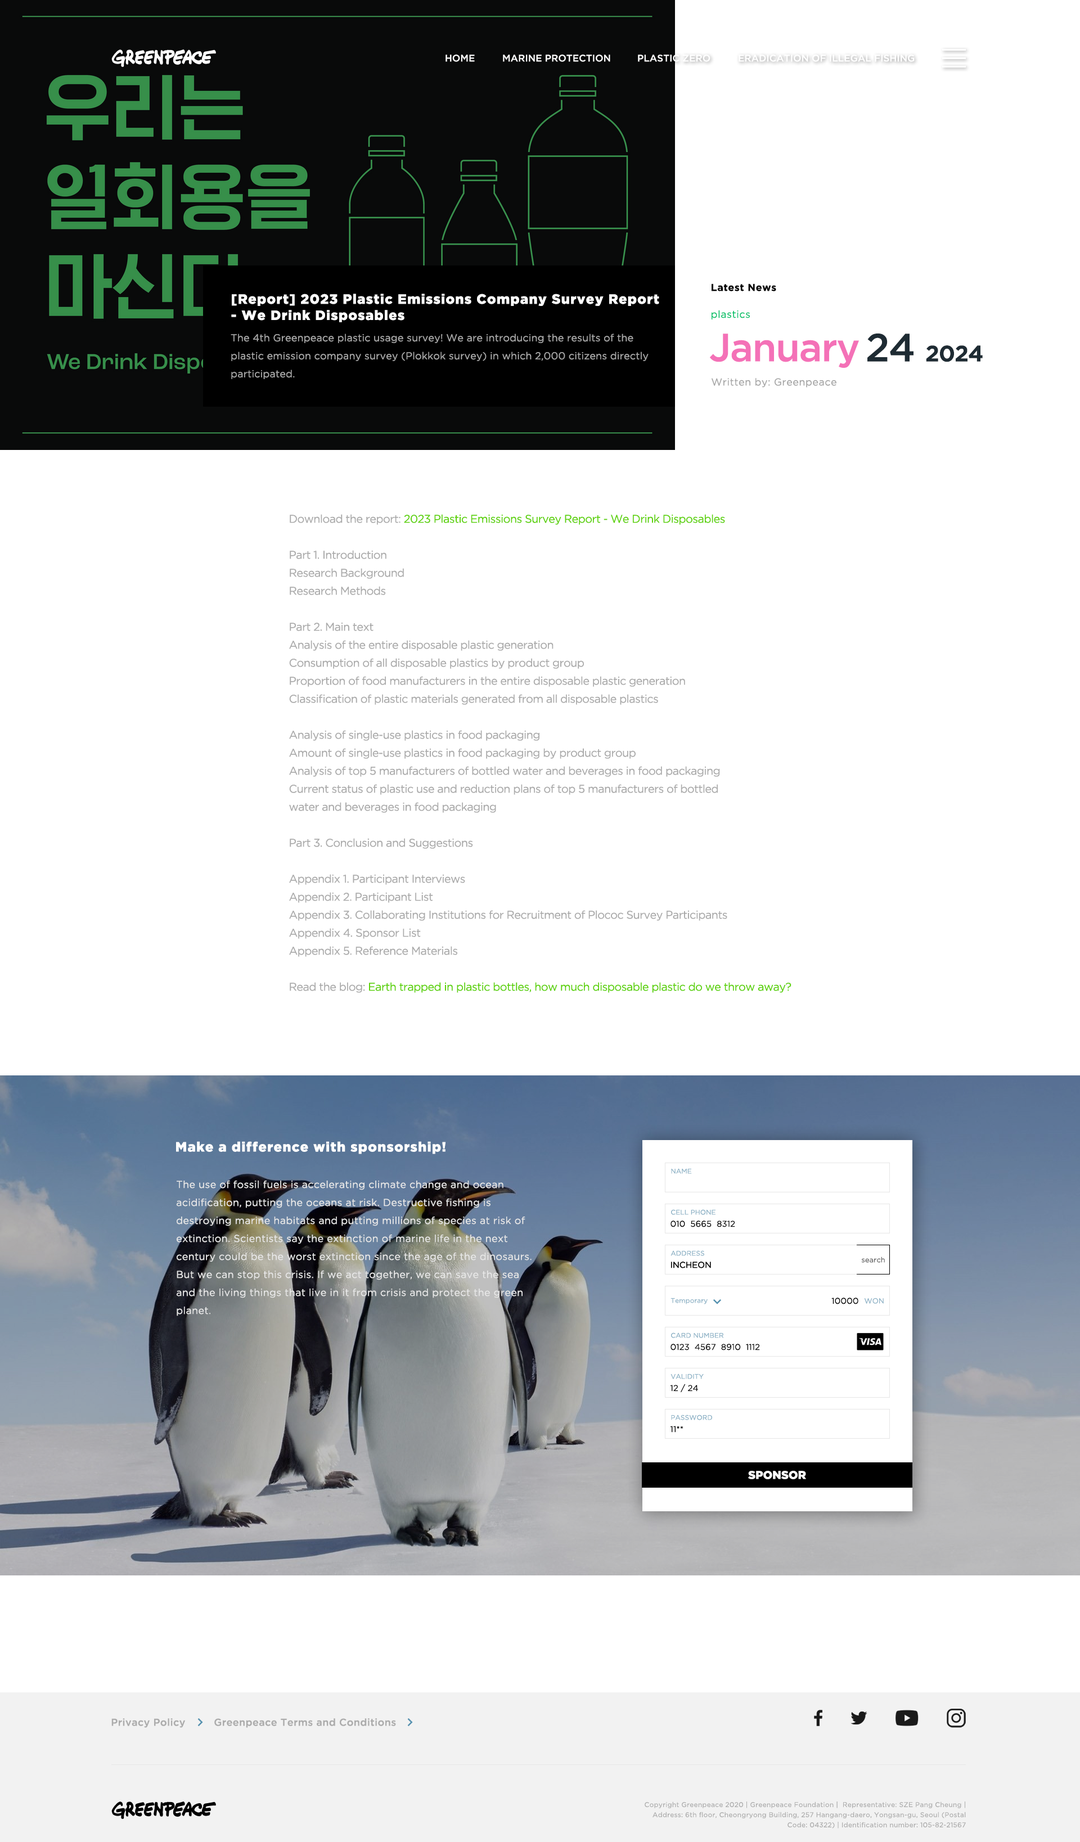
<style>
.page{position:relative;width:1080px;height:1842px;background:#ffffff}
.page>*{position:absolute;margin:0}
.t1{font:9.6px "GothamPro-Medium";color:#ffffff}
.t2{font:9.6px "GothamPro-Medium";color:#ffffff;text-transform:uppercase}
.t3{font:13.5px "GothamPro-Black";letter-spacing:0.05em;color:#ffffff}
.t4{font:10.1px "GothamPro-Bold";letter-spacing:0.025em;color:#000000}
.t5{font:10.1px "GothamPro";letter-spacing:0.025em;color:#02c169}
.t6{font:10.1px/18px "GothamPro";letter-spacing:0.005em;color:#a6a6a6}
.t7{font:39.4px "GothamPro-Medium";letter-spacing:-0.025em;color:#f471b7}
.t8{font:22.5px "GothamPro-Bold";letter-spacing:-0.025em;color:#1e2b33}
.t9{font:39.4px "GothamPro-Medium";letter-spacing:-0.025em;color:#1e2b33}
.t10{font:10.1px "GothamPro";letter-spacing:0.025em;color:#a6a6a6}
.t11{font:11.2px/18px "GothamPro";letter-spacing:-0.035em;color:#acacac}
.t12{font:11.2px/18px "GothamPro";letter-spacing:-0.035em;color:#5fd20a}
.t13{font:6.8px "GothamPro";color:#8bb0c5}
.t14{font:10.1px/18px "GothamPro";letter-spacing:0.015em;color:#e7e7e7}
.t15{font:8.4px "GothamPro";color:#000000}
.t16{font:7.3px "GothamPro";color:#676767}
.t17{font:7.3px "GothamPro";color:#8bb0c5}
.t18{font:11.2px "GothamPro-Black";color:#ffffff}
.t19{font:10.1px "GothamPro-Medium";letter-spacing:0.02em;color:#acacac}
.t20{font:6.7px/10.1px "GothamPro";letter-spacing:0.02em;color:#acacac}
</style>
<div class="page">
<p class="t1" style="left:446px;top:55px;width:29px;height:7px">HOME</p>
<p class="t2" style="left:503px;top:55px;width:107px;height:7px">marine protection</p>
<p class="t2" style="left:638px;top:55px;width:72px;height:7px">plastic zero</p>
<p class="t2" style="left:739px;top:55px;width:176px;height:7px">eradication of illegal fishing</p>
<p class="t3" style="left:231px;top:294px;width:428px;height:28px">[Report] 2023 Plastic Emissions Company Survey Report<br>- We Drink Disposables</p>
<p class="t4" style="left:712px;top:284px;width:64px;height:7px">Latest News</p>
<p class="t5" style="left:712px;top:310px;width:38px;height:10px">plastics</p>
<p class="t6" style="left:231px;top:334px;width:418px;height:45px">The 4th Greenpeace plastic usage survey! We are introducing the results of the<br>plastic emission company survey (Plokkok survey) in which 2,000 citizens directly<br>participated.</p>
<p class="t7" style="left:710px;top:334px;width:149px;height:34px">January</p>
<p class="t8" style="left:867px;top:333px;width:116px;height:29px"><span class="t9">24 </span>2024</p>
<p class="t10" style="left:712px;top:378px;width:124px;height:10px">Written by: Greenpeace</p>
<p class="t11" style="left:289px;top:514px;width:502px;height:479px">Download the report: <span class="t12">2023 Plastic Emissions Survey Report - We Drink Disposables<br></span><br>Part 1. Introduction<br>Research Background<br>Research Methods<br><br>Part 2. Main text<br>Analysis of the entire disposable plastic generation<br>Consumption of all disposable plastics by product group<br>Proportion of food manufacturers in the entire disposable plastic generation<br>Classification of plastic materials generated from all disposable plastics<br><br>Analysis of single-use plastics in food packaging<br>Amount of single-use plastics in food packaging by product group<br>Analysis of top 5 manufacturers of bottled water and beverages in food packaging<br>Current status of plastic use and reduction plans of top 5 manufacturers of bottled<br>water and beverages in food packaging<br><br>Part 3. Conclusion and Suggestions<br><br>Appendix 1. Participant Interviews<br>Appendix 2. Participant List<br>Appendix 3. Collaborating Institutions for Recruitment of Plococ Survey Participants<br>Appendix 4. Sponsor List<br>Appendix 5. Reference Materials<br><br>Read the blog: <span class="t12">Earth trapped in plastic bottles, how much disposable plastic do we throw away?</span></p>
<p class="t3" style="left:176px;top:1141px;width:270px;height:13px">Make a difference with sponsorship!</p>
<p class="t13" style="left:671px;top:1168px;width:21px;height:6px">NAME</p>
<p class="t14" style="left:176px;top:1181px;width:356px;height:135px">The use of fossil fuels is accelerating climate change and ocean<br>acidification, putting the oceans at risk. Destructive fishing is<br>destroying marine habitats and putting millions of species at risk of<br>extinction. Scientists say the extinction of marine life in the next<br>century could be the worst extinction since the age of the dinosaurs.<br>But we can stop this crisis. If we act together, we can save the sea<br>and the living things that live in it from crisis and protect the green<br>planet.</p>
<p class="t13" style="left:671px;top:1209px;width:45px;height:6px">CELL PHONE</p>
<p class="t15" style="left:670px;top:1221px;width:65px;height:6px">010  5665  8312</p>
<p class="t13" style="left:670px;top:1250px;width:34px;height:6px">ADDRESS</p>
<p class="t15" style="left:671px;top:1262px;width:40px;height:6px">INCHEON</p>
<p class="t15" style="left:671px;top:1262px;width:40px;height:6px">INCHEON</p>
<p class="t16" style="left:861px;top:1257px;width:24px;height:6px">search</p>
<p class="t13" style="left:670px;top:1298px;width:38px;height:6px">Temporary</p>
<p class="t15" style="left:831px;top:1298px;width:27px;height:6px">10000</p>
<p class="t17" style="left:864px;top:1298px;width:20px;height:6px">WON</p>
<p class="t13" style="left:671px;top:1333px;width:53px;height:5px">CARD NUMBER</p>
<p class="t15" style="left:670px;top:1344px;width:90px;height:7px">0123  4567  8910  1112</p>
<p class="t13" style="left:670px;top:1374px;width:34px;height:5px">VALIDITY</p>
<p class="t15" style="left:670px;top:1384px;width:28px;height:9px">12 / 24</p>
<p class="t13" style="left:671px;top:1415px;width:41px;height:5px">PASSWORD</p>
<p class="t15" style="left:670px;top:1426px;width:13px;height:7px">11**</p>
<p class="t18" style="left:748px;top:1471px;width:58px;height:8px">SPONSOR</p>
<p class="t19" style="left:111px;top:1718px;width:74px;height:10px">Privacy Policy</p>
<p class="t19" style="left:214px;top:1718px;width:182px;height:10px">Greenpeace Terms and Conditions</p>
<p class="t20" style="left:645px;top:1802px;width:321px;height:27px;text-align:right">Copyright Greenpeace 2020 | Greenpeace Foundation |  Representative: SZE Pang Cheung | Address: 6th floor, Cheongryong Building, 257 Hangang-daero, Yongsan-gu, Seoul (Postal Code: 04322) | Identification number: 105-82-21567</p>
</div>
